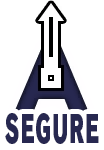
<style>
.page{position:relative;width:104px;height:150px;background:#ffffff}
.page>*{position:absolute;margin:0}
.t1{font:37.3px "RodinNTLGPro-UB";color:#272850;scale:0.56 1}
</style>
<div class="page">
<p class="t1" style="left:5px;top:113px;width:94px;height:31px">SEGURE</p>
</div>
